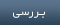
<style>
.page{position:relative;width:60px;height:25px}
.page>*{position:absolute;margin:0}
.t1{font:12px "BYekan";color:#ffffff}
</style>
<div class="page">
<p class="t1" style="left:13px;top:11px;width:32px;height:7px">بـررسی</p>
</div>
